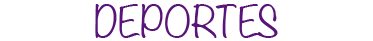
<style>
.page{position:relative;width:373px;height:41px;background:#ffffff}
.page>*{position:absolute;margin:0}
.t1{font:38.6px "Noteworthy-Light";color:#581478}
</style>
<div class="page">
<p class="t1" style="left:95px;top:4px;width:183px;height:34px">DEPORTES</p>
</div>
